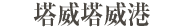
<style>
.page{position:relative;width:184px;height:27px;background:#ffffff}
.page>*{position:absolute;margin:0}
.t1{font:26px "RyuminPro-ExBold";color:#4c4843;scale:0.9 1}
</style>
<div class="page">
<p class="t1" style="left:33px;top:2px;width:117px;height:25px">塔威塔威港</p>
</div>
